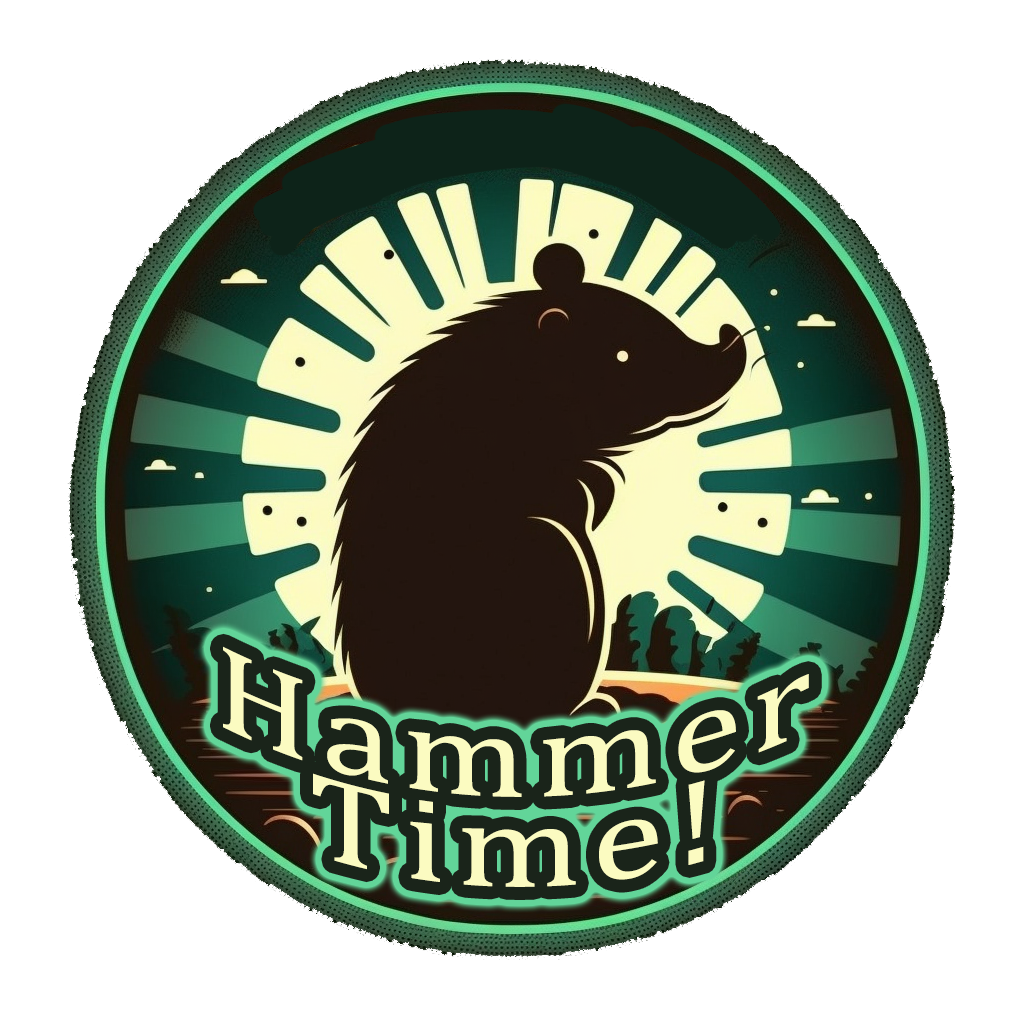
<style>
.page{position:relative;width:1024px;height:1024px;background:#ffffff}
.page>*{position:absolute;margin:0}
.t1{font:120px/90px "Cambria";letter-spacing:0.075em;color:#fbfbc1;scale:1.2 1}
</style>
<div class="page">
<p class="t1" style="left:223px;top:646px;width:586px;height:241px;text-align:center">Hammer Time!</p>
</div>
